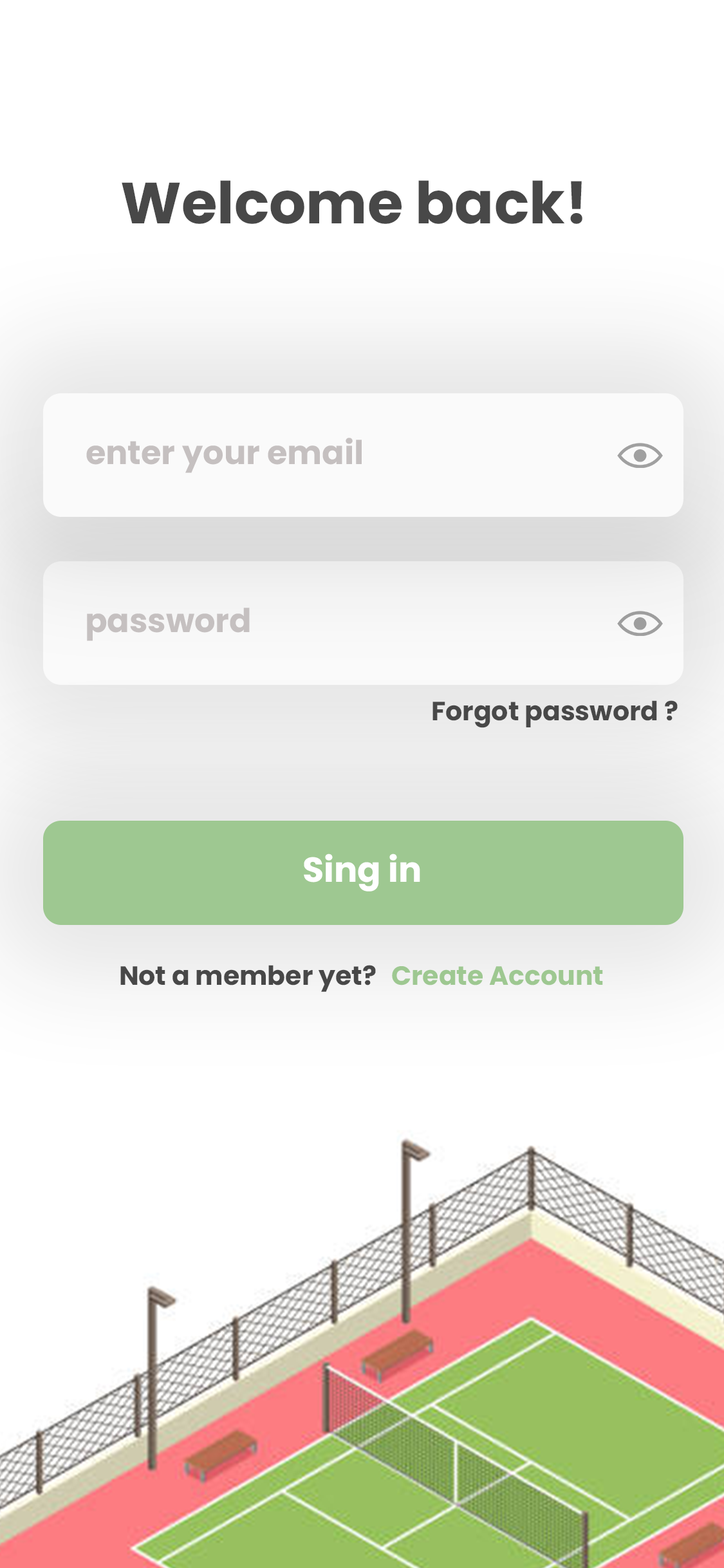
<style>
.page{position:relative;width:724px;height:1568px;background:#ffffff}
.page>*{position:absolute;margin:0}
.t1{font:57.9px "Poppins-Bold";color:#484848}
.t2{font:32.8px "Poppins-Bold";color:#c5c0c0}
.t3{font:26.4px "Poppins-Bold";color:#484848}
.t4{font:34.8px "Poppins-Bold";color:#ffffff}
.t5{font:26.4px "Poppins-Bold";color:#9ec891}
</style>
<div class="page">
<p class="t1" style="left:122px;top:180px;width:461px;height:44px">Welcome back!</p>
<p class="t2" style="left:86px;top:438px;width:276px;height:35px">enter your email</p>
<p class="t2" style="left:87px;top:608px;width:163px;height:33px">password</p>
<p class="t3" style="left:433px;top:700px;width:245px;height:28px">Forgot password ?</p>
<p class="t4" style="left:304px;top:854px;width:116px;height:37px">Sing in</p>
<p class="t3" style="left:120px;top:965px;width:256px;height:27px">Not a member yet?</p>
<p class="t5" style="left:392px;top:966px;width:211px;height:19px">Create Account</p>
</div>
